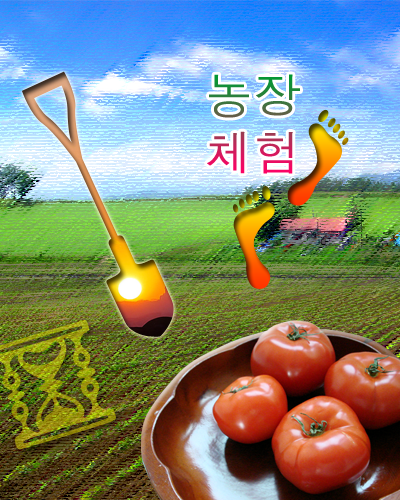
<style>
.page{position:relative;width:400px;height:500px}
.page>*{position:absolute;margin:0}
.t1{font:48px "Dotum"}
</style>
<div class="page">
<p class="t1" style="left:207px;top:74px;width:93px;height:100px">농장<br>체험</p>
</div>
